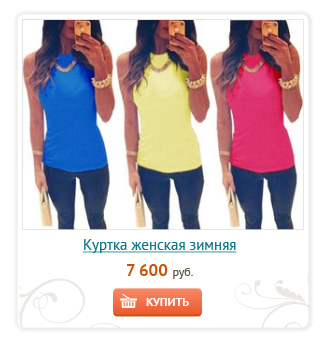
<style>
.page{position:relative;width:329px;height:347px;background:#ffffff}
.page>*{position:absolute;margin:0}
.t1{font:15px "PTSans-Regular";color:#117988;text-decoration:underline}
.t2{font:17px "PTSans-Bold";color:#ca540a}
.t3{font:12px "PTSans-Regular";color:#62584a}
.t4{font:12px "PTSans-Bold";color:#ffffff}
</style>
<div class="page">
<p class="t1" style="left:82px;top:239px;width:155px;height:14px">Куртка женская зимняя</p>
<p class="t2" style="left:127px;top:264px;width:66px;height:15px">7 600 <span class="t3">руб.</span></p>
<p class="t4" style="left:146px;top:298px;width:43px;height:8px">КУПИТЬ</p>
</div>
